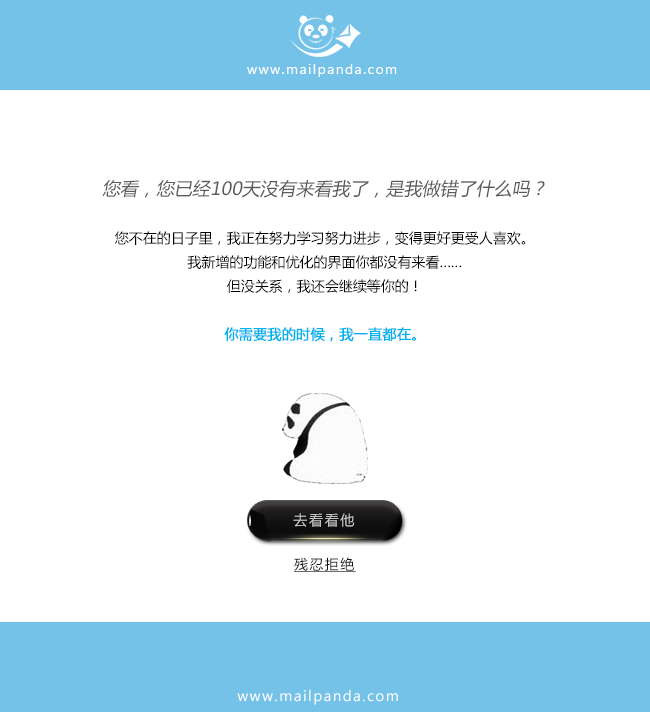
<style>
.page{position:relative;width:650px;height:713px;background:#ffffff}
.page>*{position:absolute;margin:0}
.t1{font:14px "SegoeUI";letter-spacing:0.1em;color:#fefefe}
.t2{font:14px/24px "MicrosoftYaHei";color:#000000}
.t3{font:18px/24px "MicrosoftYaHei";color:#5b5b5b;font-style:italic}
.t4{font:14px/24px "MicrosoftYaHei";color:#00b3ef;font-weight:bold}
.t5{font:14px "MicrosoftYaHei";letter-spacing:0.1em;color:#c6c6c6}
.t6{font:14px "MicrosoftYaHei";letter-spacing:0.1em;color:#151414;text-decoration:underline}
.t7{font:14px "MicrosoftYaHei";letter-spacing:0.1em;color:#ffffff}
</style>
<div class="page">
<p class="t1" style="left:247px;top:64px;width:150px;height:13px">www.mailpanda.com</p>
<p class="t2" style="left:102px;top:180px;width:443px;height:162px;text-align:center"><span class="t3">您看，您已经100天没有来看我了，是我做错了什么吗？<br><br></span>您不在的日子里，我正在努力学习努力进步，变得更好更受人喜欢。<br>我新增的功能和优化的界面你都没有来看……<br>但没关系，我还会继续等你的！<br><span class="t4"><br>你需要我的时候，我一直都在。</span></p>
<p class="t5" style="left:293px;top:513px;width:62px;height:14px">去看看他</p>
<p class="t6" style="left:294px;top:557px;width:62px;height:15px">残忍拒绝</p>
<p class="t7" style="left:237px;top:689px;width:161px;height:16px">www.mailpanda.com</p>
</div>
